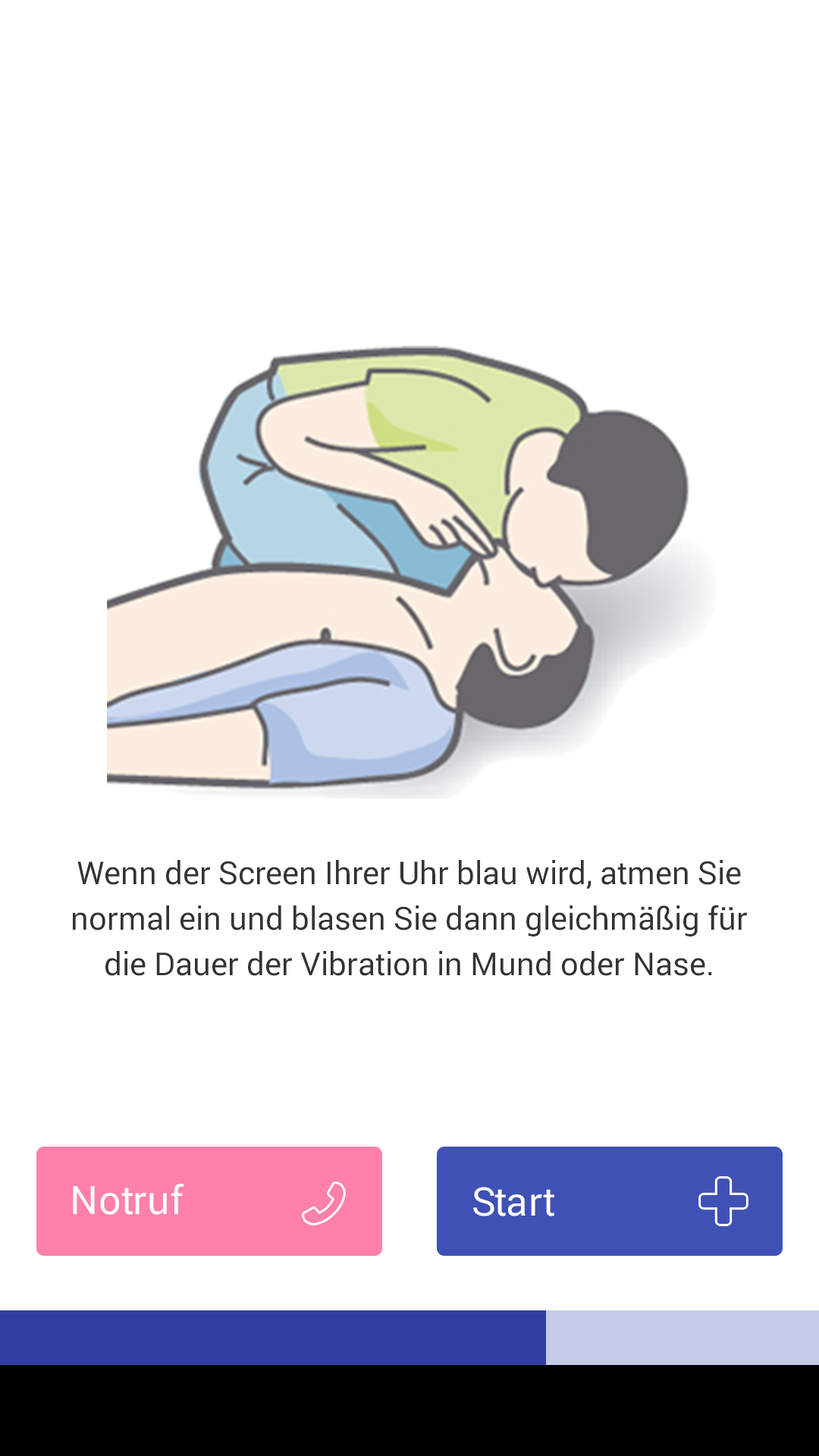
<style>
.page{position:relative;width:819px;height:1456px;background:#ffffff}
.page>*{position:absolute;margin:0}
.t1{font:31.8px/45.5px "Roboto-Regular";color:#333333}
.t2{font:39.4px "Roboto-Regular";color:#ffffff}
</style>
<div class="page">
<p class="t1" style="left:73px;top:860px;width:675px;height:116px;text-align:center">Wenn der Screen Ihrer Uhr blau wird, atmen Sie normal ein und blasen Sie dann gleichmäßig für die Dauer der Vibration in Mund oder Nase.</p>
<p class="t2" style="left:73px;top:1183px;width:111px;height:32px">Notruf</p>
<p class="t2" style="left:473px;top:1187px;width:81px;height:29px">Start</p>
</div>
